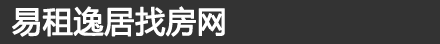
<style>
.page{position:relative;width:440px;height:44px;background:#333333}
.page>*{position:absolute;margin:0}
.t1{font:30px "MicrosoftYaHei";color:#ffffff;font-weight:bold}
</style>
<div class="page">
<p class="t1" style="left:12px;top:6px;width:213px;height:31px">易租逸居找房网</p>
</div>
